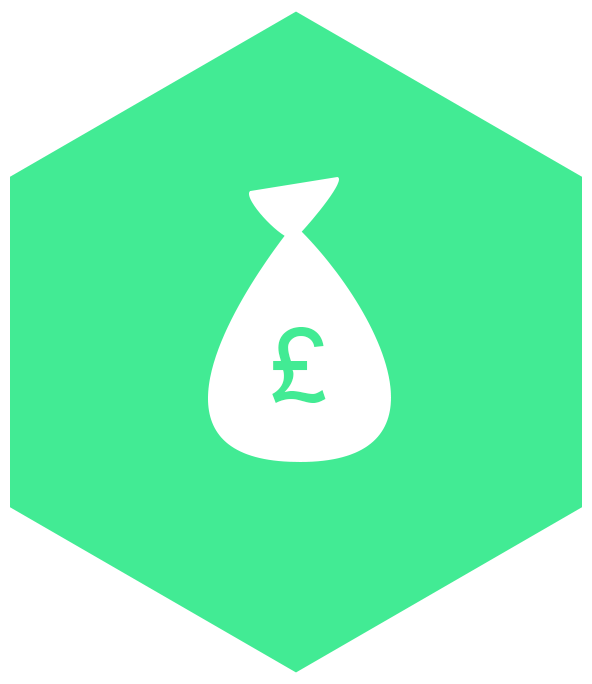
<style>
.page{position:relative;width:592px;height:684px;background:#42eb94}
.page>*{position:absolute;margin:0}
.t1{font:103px "ArialMT";color:#42eb94}
</style>
<div class="page">
<p class="t1" style="left:272px;top:327px;width:54px;height:76px">£</p>
</div>
